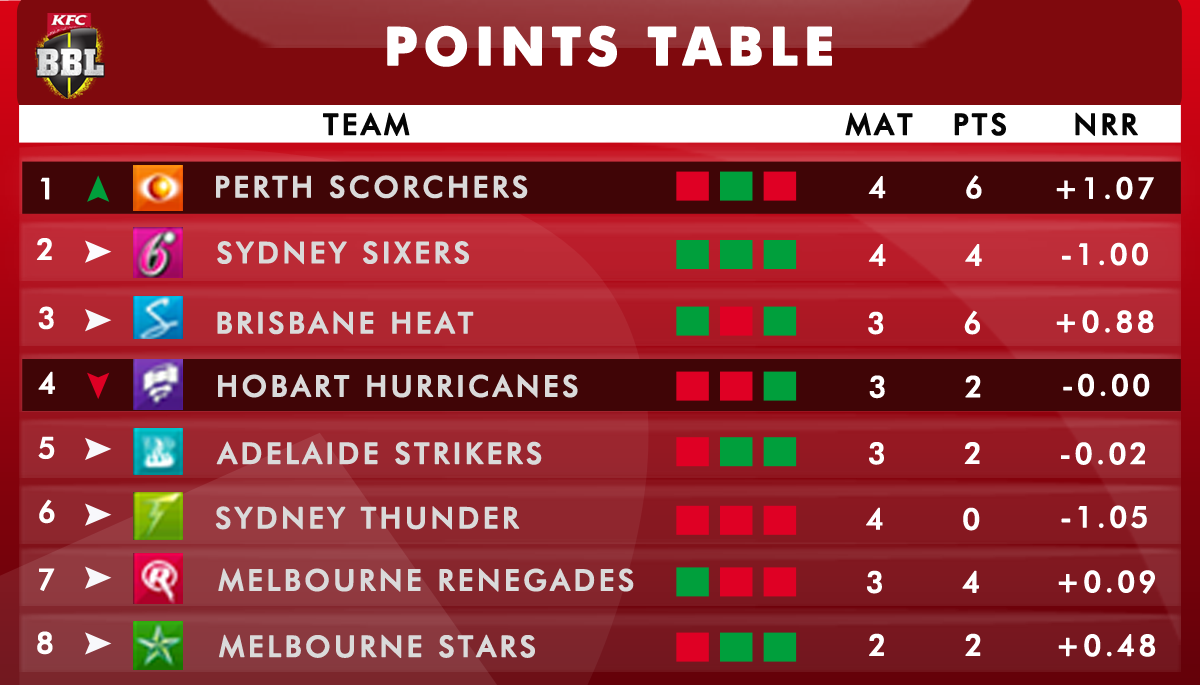
<style>
.page{position:relative;width:1200px;height:685px}
.page>*{position:absolute;margin:0}
.t1{font:52.6px "FuturaBT-Bold";letter-spacing:0.1em;color:#ffffff;text-transform:uppercase;font-weight:bold}
.t2{font:29.3px "FuturaBT-Medium";letter-spacing:0.1em;color:#050505;text-transform:uppercase;font-weight:bold}
.t3{font:29.3px "FuturaBT-Medium";letter-spacing:0.1em;color:#ffffff;text-transform:uppercase;font-weight:bold}
.t4{font:29.3px "FuturaBT-Medium";letter-spacing:0.1em;color:#dadada;text-transform:uppercase;font-weight:bold}
</style>
<div class="page">
<p class="t1" style="left:387px;top:25px;width:445px;height:42px">POINTS TABLE</p>
<p class="t2" style="left:323px;top:112px;width:87px;height:24px">Team</p>
<p class="t2" style="left:845px;top:112px;width:68px;height:24px">Mat</p>
<p class="t2" style="left:954px;top:112px;width:52px;height:24px">pts</p>
<p class="t2" style="left:1075px;top:112px;width:63px;height:24px">Nrr</p>
<p class="t3" style="left:40px;top:177px;width:10px;height:23px">1</p>
<p class="t4" style="left:216px;top:175px;width:312px;height:24px">Perth Scorchers</p>
<p class="t3" style="left:868px;top:175px;width:114px;height:24px">4      6</p>
<p class="t3" style="left:1056px;top:176px;width:98px;height:24px">+1.07</p>
<p class="t3" style="left:36px;top:238px;width:16px;height:22px">2</p>
<p class="t4" style="left:217px;top:240px;width:252px;height:25px">Sydney Sixers</p>
<p class="t3" style="left:868px;top:244px;width:114px;height:22px">4      4</p>
<p class="t3" style="left:1062px;top:242px;width:86px;height:24px">-1.00</p>
<p class="t3" style="left:38px;top:306px;width:16px;height:24px">3</p>
<p class="t4" style="left:217px;top:311px;width:257px;height:24px">Brisbane Heat</p>
<p class="t3" style="left:868px;top:310px;width:112px;height:25px">3      6</p>
<p class="t3" style="left:1056px;top:310px;width:98px;height:23px">+0.88</p>
<p class="t3" style="left:38px;top:371px;width:17px;height:23px">4</p>
<p class="t4" style="left:218px;top:374px;width:360px;height:24px">Hobart Hurricanes</p>
<p class="t3" style="left:869px;top:375px;width:112px;height:24px">3      2</p>
<p class="t3" style="left:1063px;top:373px;width:87px;height:24px">-0.00</p>
<p class="t3" style="left:38px;top:436px;width:17px;height:24px">5</p>
<p class="t4" style="left:216px;top:441px;width:326px;height:24px">Adelaide Strikers</p>
<p class="t3" style="left:869px;top:442px;width:111px;height:23px">3      2</p>
<p class="t3" style="left:1061px;top:442px;width:84px;height:23px">-0.02</p>
<p class="t3" style="left:39px;top:499px;width:16px;height:25px">6</p>
<p class="t4" style="left:215px;top:506px;width:305px;height:24px">Sydney Thunder</p>
<p class="t3" style="left:866px;top:507px;width:114px;height:24px">4      0</p>
<p class="t3" style="left:1061px;top:505px;width:86px;height:24px">-1.05</p>
<p class="t3" style="left:39px;top:568px;width:16px;height:23px">7</p>
<p class="t4" style="left:218px;top:568px;width:416px;height:24px">Melbourne Renegades</p>
<p class="t3" style="left:867px;top:570px;width:112px;height:24px">3      4</p>
<p class="t3" style="left:1058px;top:570px;width:97px;height:24px">+0.09</p>
<p class="t3" style="left:37px;top:631px;width:16px;height:24px">8</p>
<p class="t4" style="left:219px;top:634px;width:316px;height:24px">Melbourne Stars</p>
<p class="t3" style="left:869px;top:633px;width:112px;height:23px">2      2</p>
<p class="t3" style="left:1058px;top:634px;width:98px;height:23px">+0.48</p>
</div>
